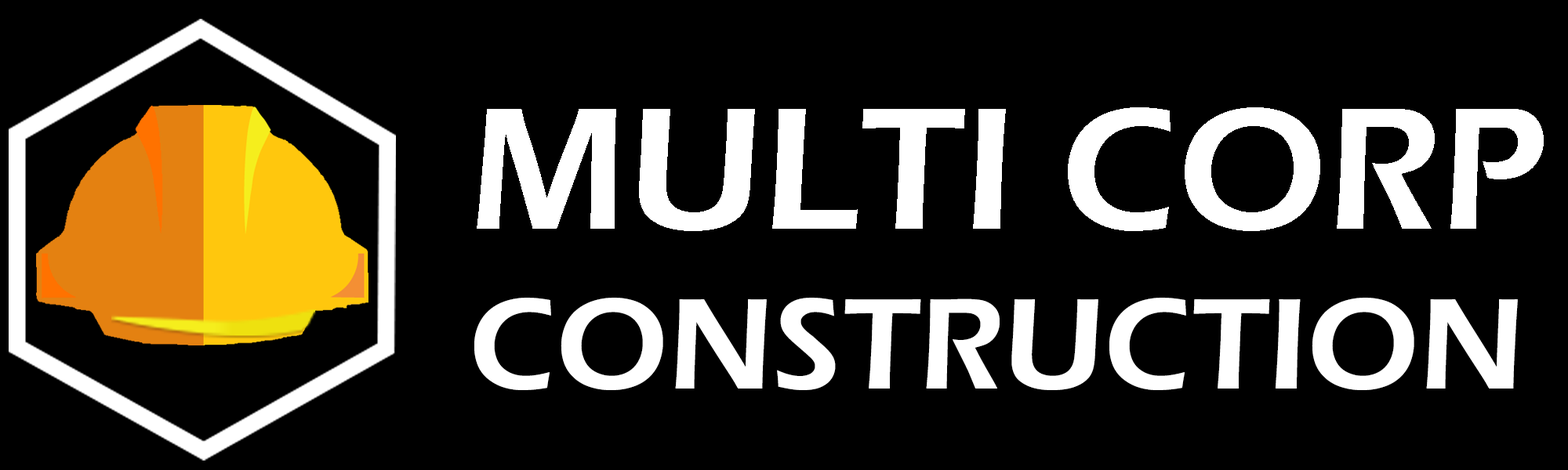
<style>
.page{position:relative;width:1568px;height:470px;background:#000000}
.page>*{position:absolute;margin:0}
.t1{font:179.7px "ErasITC-Demi";color:#ffffff}
.t2{font:133.9px "ErasITC-Demi";color:#ffffff}
</style>
<div class="page">
<p class="t1" style="left:477px;top:107px;width:1067px;height:124px">MULTI CORP</p>
<p class="t2" style="left:474px;top:298px;width:1044px;height:92px">CONSTRUCTION</p>
</div>
